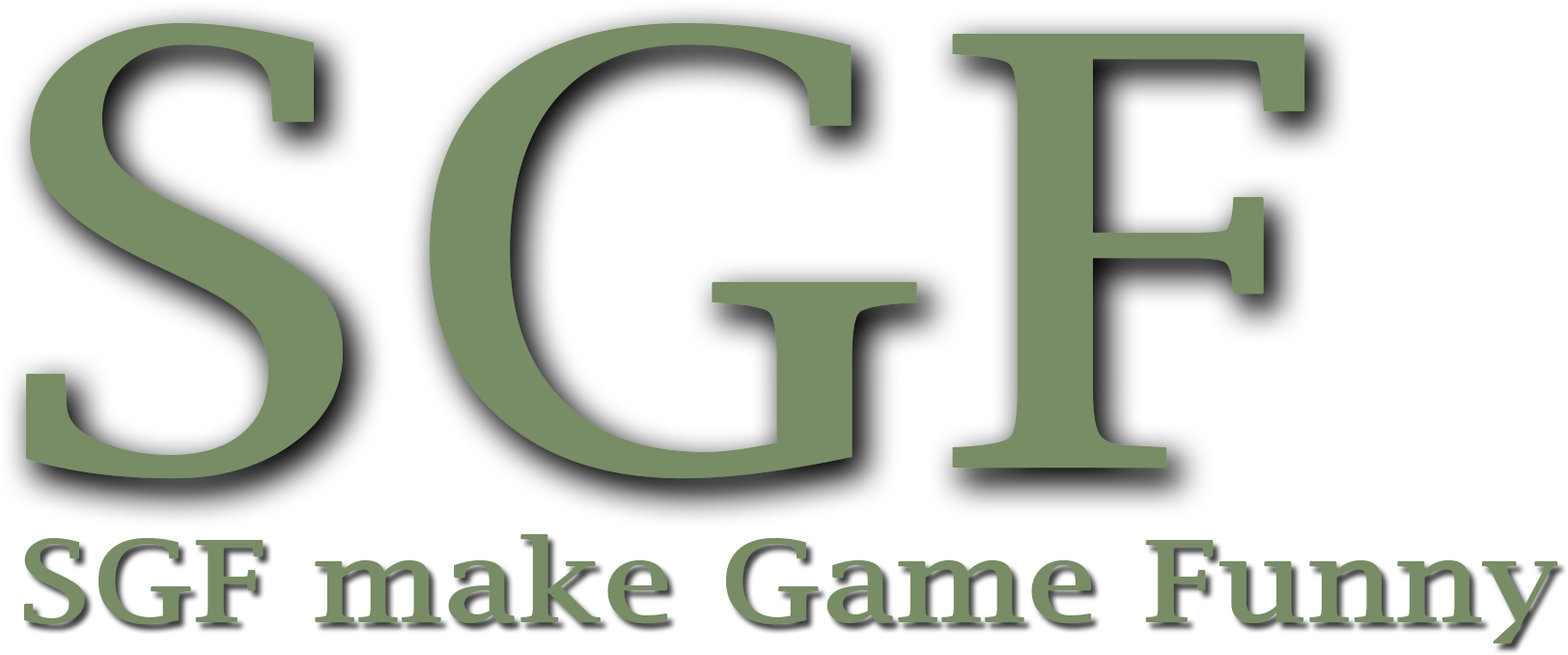
<style>
.page{position:relative;width:1568px;height:655px;background:#ffffff}
.page>*{position:absolute;margin:0}
.t1{font:597.8px "LucidaBright";color:#788c66;font-weight:bold;scale:1.2 1}
.t2{font:110.7px "LucidaBright";color:#788c66;font-weight:bold;scale:1.2 1}
</style>
<div class="page">
<p class="t1" style="left:26px;top:22px;width:1279px;height:457px">SGF</p>
<p class="t2" style="left:23px;top:533px;width:1535px;height:111px">SGF make Game Funny</p>
</div>
